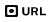
<style>
.page{position:relative;width:51px;height:22px;background:#ffffff}
.page>*{position:absolute;margin:0}
.t1{font:11.6px "AlrightSans-Bold";color:#000000;scale:1.06 1}
</style>
<div class="page">
<p class="t1" style="left:22px;top:7px;width:24px;height:9px">URL</p>
</div>
